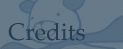
<style>
.page{position:relative;width:123px;height:49px;background:#667a8a}
.page>*{position:absolute;margin:0}
.t1{font:24px "PalatinoLinotype-Roman";color:#263d50}
</style>
<div class="page">
<p class="t1" style="left:8px;top:22px;width:77px;height:19px">Credits</p>
</div>
